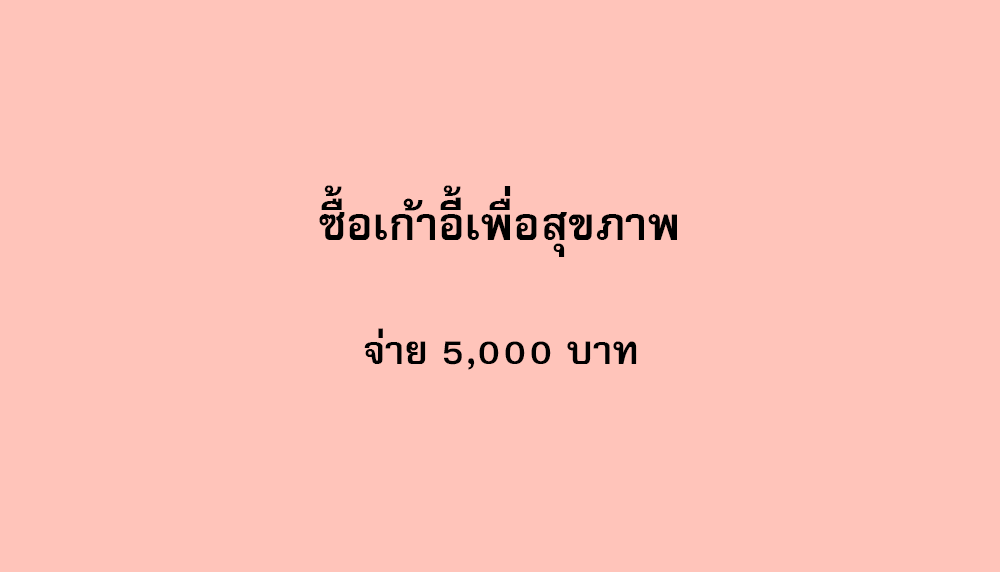
<style>
.page{position:relative;width:1000px;height:572px;background:#ffc4ba}
.page>*{position:absolute;margin:0}
.t1{font:64px "FreesiaUPCBold";color:#000000}
.t2{font:56px "FreesiaUPCBold";color:#000000}
</style>
<div class="page">
<p class="t1" style="left:319px;top:185px;width:358px;height:72px">ซื้อเก้าอี้เพื่อสุขภาพ</p>
<p class="t2" style="left:364px;top:328px;width:273px;height:42px">จ่าย 5,000 บาท</p>
</div>
